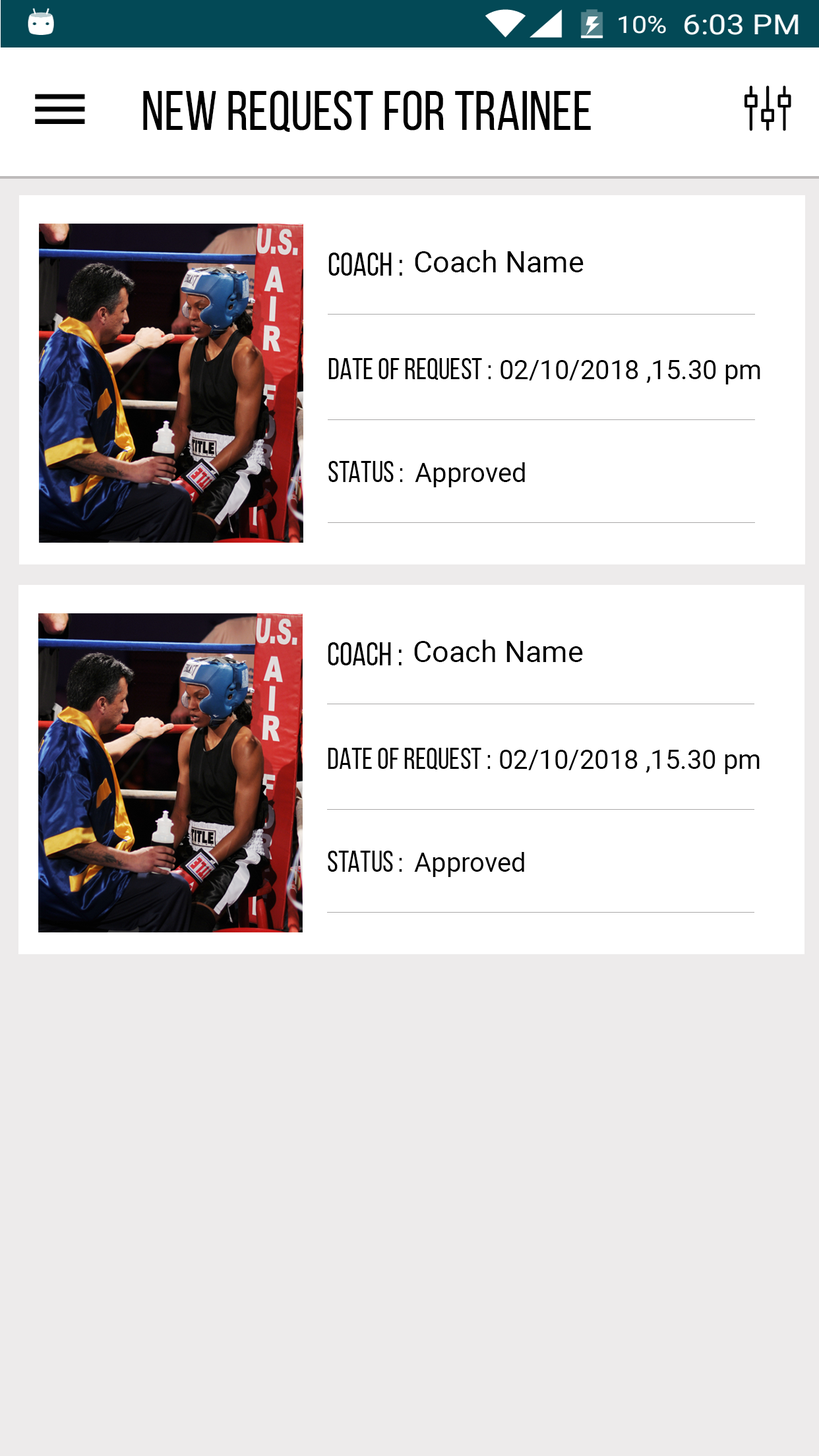
<style>
.page{position:relative;width:819px;height:1456px;background:#ffffff}
.page>*{position:absolute;margin:0}
.t1{font:56px "BebasNeueRegular";color:#010101}
.t2{font:33px "TestN-TestNRegular";color:#000000}
.t3{font:29.7px "Roboto-Regular";color:#000000}
.t4{font:29.7px "TestN-TestNRegular";color:#000000}
.t5{font:26.4px "Roboto-Regular";color:#000000}
</style>
<div class="page">
<p class="t1" style="left:143px;top:90px;width:448px;height:42px">NEW REQUEST for Trainee</p>
<p class="t2" style="left:328px;top:253px;width:74px;height:23px">COACH :</p>
<p class="t3" style="left:415px;top:250px;width:169px;height:22px">Coach Name</p>
<p class="t4" style="left:328px;top:358px;width:163px;height:22px">DATE OF REQUEST :</p>
<p class="t5" style="left:500px;top:360px;width:260px;height:24px">02/10/2018 ,15.30 pm</p>
<p class="t4" style="left:328px;top:461px;width:75px;height:21px">STATUS :</p>
<p class="t5" style="left:415px;top:462px;width:110px;height:25px">Approved</p>
<p class="t3" style="left:414px;top:640px;width:169px;height:22px">Coach Name</p>
<p class="t2" style="left:328px;top:642px;width:74px;height:23px">COACH :</p>
<p class="t4" style="left:328px;top:748px;width:163px;height:22px">DATE OF REQUEST :</p>
<p class="t5" style="left:500px;top:750px;width:260px;height:24px">02/10/2018 ,15.30 pm</p>
<p class="t4" style="left:328px;top:851px;width:74px;height:21px">STATUS :</p>
<p class="t5" style="left:414px;top:852px;width:110px;height:25px">Approved</p>
</div>
